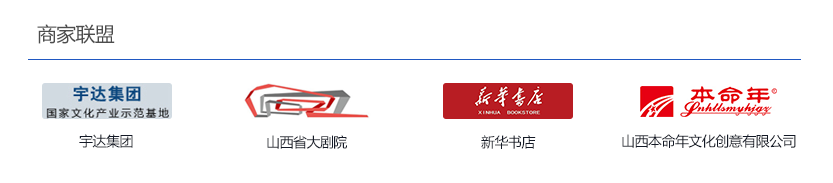
<style>
.page{position:relative;width:833px;height:183px;background:#ffffff}
.page>*{position:absolute;margin:0}
.t1{font:20px "MicrosoftYaHei";letter-spacing:-0.04em;color:#4d4d4d}
.t2{font:14px "MicrosoftYaHei";letter-spacing:-0.04em;color:#131926}
</style>
<div class="page">
<p class="t1" style="left:37px;top:24px;width:78px;height:20px">商家联盟</p>
<p class="t2" style="left:79px;top:134px;width:54px;height:14px">宇达集团</p>
<p class="t2" style="left:267px;top:135px;width:80px;height:14px">山西省大剧院</p>
<p class="t2" style="left:481px;top:135px;width:55px;height:14px">新华书店</p>
<p class="t2" style="left:622px;top:134px;width:174px;height:14px">山西本命年文化创意有限公司</p>
</div>
